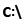
<style>
.page{position:relative;width:24px;height:24px;background:#ffffff}
.page>*{position:absolute;margin:0}
.t1{font:16px "Calibri-Bold";color:#000000}
</style>
<div class="page">
<p class="t1" style="left:3px;top:5px;width:19px;height:14px">C \</p>
<p class="t1" style="left:12px;top:9px;width:3px;height:7px">:</p>
</div>
